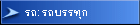
<style>
.page{position:relative;width:140px;height:25px}
.page>*{position:absolute;margin:0}
.t1{font:15.3px "EucrosiaDSE";color:#ffffff;scale:1.12 1}
</style>
<div class="page">
<p class="t1" style="left:25px;top:10px;width:62px;height:9px">Ã¶:Ã¶ºÃÃ·Ø¡</p>
</div>
